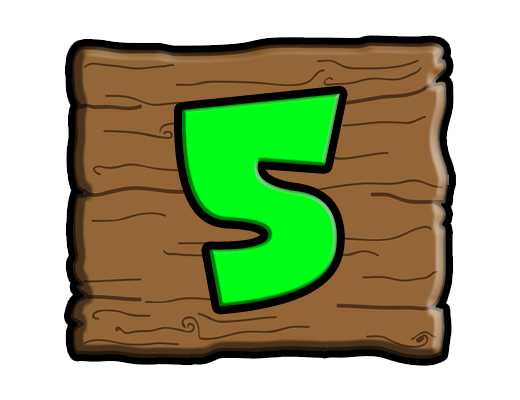
<style>
.page{position:relative;width:520px;height:400px;background:#ffffff}
.page>*{position:absolute;margin:0}
.t1{font:256.5px "Funhouse";color:#00ff18}
</style>
<div class="page">
<p class="t1" style="left:182px;top:93px;width:158px;height:214px">5</p>
</div>
